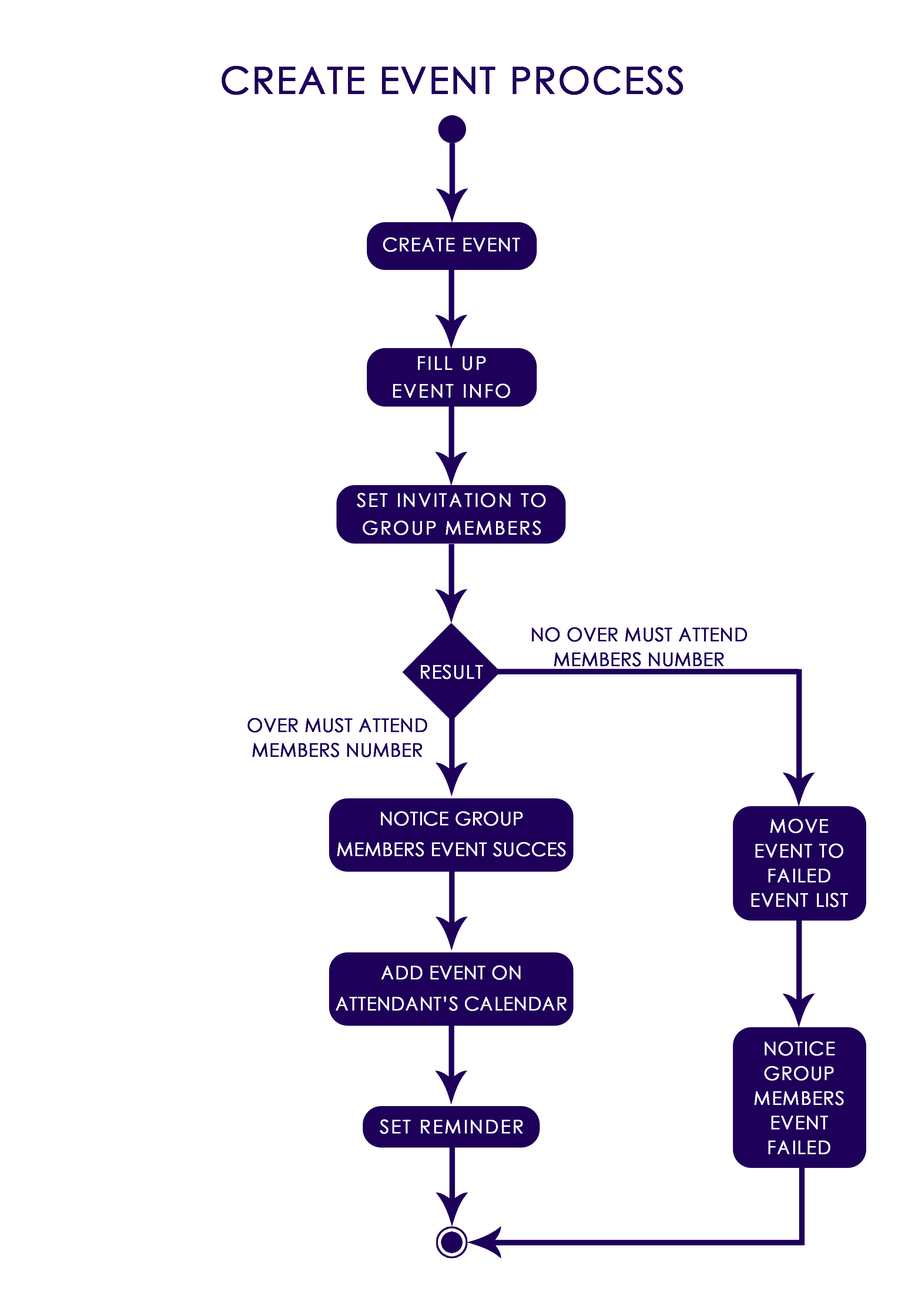
<style>
.page{position:relative;width:918px;height:1299px;background:#ffffff}
.page>*{position:absolute;margin:0}
.t1{font:37px "CenturyGothic";letter-spacing:0.025em;color:#1e005a;text-transform:uppercase;font-weight:bold}
.t2{font:18.5px "CenturyGothic";letter-spacing:0.025em;color:#ffffff;text-transform:uppercase;font-weight:bold}
.t3{font:18.5px/27.8px "CenturyGothic";letter-spacing:0.075em;color:#ffffff;text-transform:uppercase;font-weight:bold}
.t4{font:4.4px/24.7px "CenturyGothic";color:#1e005a;text-transform:uppercase;font-weight:bold}
.t5{font:18.5px/30.9px "CenturyGothic";color:#ffffff;text-transform:uppercase;font-weight:bold}
.t6{font:18.5px/24.7px "CenturyGothic";letter-spacing:0.025em;color:#ffffff;text-transform:uppercase;font-weight:bold}
.t7{font:18.5px "CenturyGothic";letter-spacing:0.075em;color:#ffffff;text-transform:uppercase;font-weight:bold}
</style>
<div class="page">
<p class="t1" style="left:222px;top:66px;width:461px;height:29px">create event process</p>
<p class="t2" style="left:383px;top:237px;width:137px;height:15px">create event</p>
<p class="t3" style="left:393px;top:356px;width:117px;height:42px;text-align:center">fill up event info</p>
<p class="t3" style="left:357px;top:493px;width:189px;height:42px;text-align:center">set invitation to group members</p>
<p class="t4" style="left:532px;top:627px;width:215px;height:39px;text-align:center">no over must attend<br>members number</p>
<p class="t2" style="left:421px;top:665px;width:62px;height:14px">result</p>
<p class="t4" style="left:248px;top:718px;width:179px;height:39px;text-align:center">over must attend<br>members number</p>
<p class="t5" style="left:337px;top:811px;width:229px;height:45px;text-align:justify">notice group<br>members event succes</p>
<p class="t6" style="left:752px;top:819px;width:96px;height:88px;text-align:center">Move event to failed event list</p>
<p class="t5" style="left:336px;top:965px;width:230px;height:46px;text-align:justify">add event on<br>attendant’s calendar</p>
<p class="t6" style="left:755px;top:1041px;width:89px;height:113px;text-align:center">notice group members event failed</p>
<p class="t7" style="left:380px;top:1119px;width:143px;height:15px">set reminder</p>
</div>
